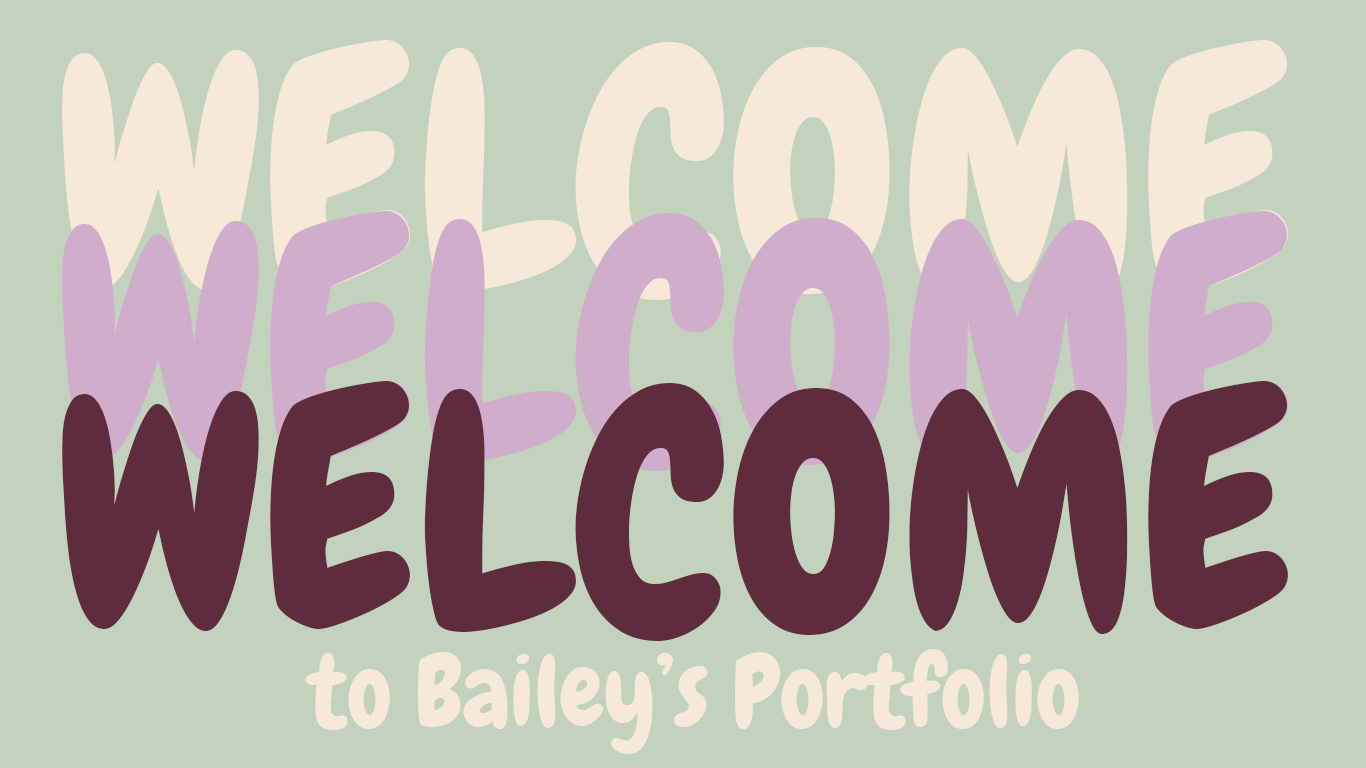
<style>
.page{position:relative;width:1366px;height:768px;background:#c2d2bd}
.page>*{position:absolute;margin:0}
.t1{font:325px "Chewy-Regular";color:#f6e9d7}
.t2{font:325px "Chewy-Regular";color:#5f2c3e}
.t3{font:100px "Chewy-Regular";color:#f6e9d7}
</style>
<div class="page">
<p class="t1" style="left:62px;top:40px;width:1226px;height:260px">WELCOME</p>
<p class="t2" style="left:62px;top:381px;width:1226px;height:260px">WELCOME</p>
<p class="t3" style="left:305px;top:649px;width:774px;height:105px">to Bailey’s Portfolio</p>
</div>
